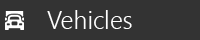
<style>
.page{position:relative;width:200px;height:40px;background:#333333}
.page>*{position:absolute;margin:0}
.t1{font:25px "SegoeUI-Semilight";color:#ffffff}
</style>
<div class="page">
<p class="t1" style="left:47px;top:10px;width:85px;height:19px">Vehicles</p>
</div>
